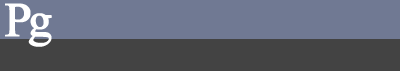
<style>
.page{position:relative;width:400px;height:71px;background:#707993}
.page>*{position:absolute;margin:0}
.t1{font:48px "TimesNewRomanPSMT";letter-spacing:-0.1em;color:#ffffff;font-weight:bold}
</style>
<div class="page">
<p class="t1" style="left:5px;top:3px;width:47px;height:44px">Pg</p>
</div>
